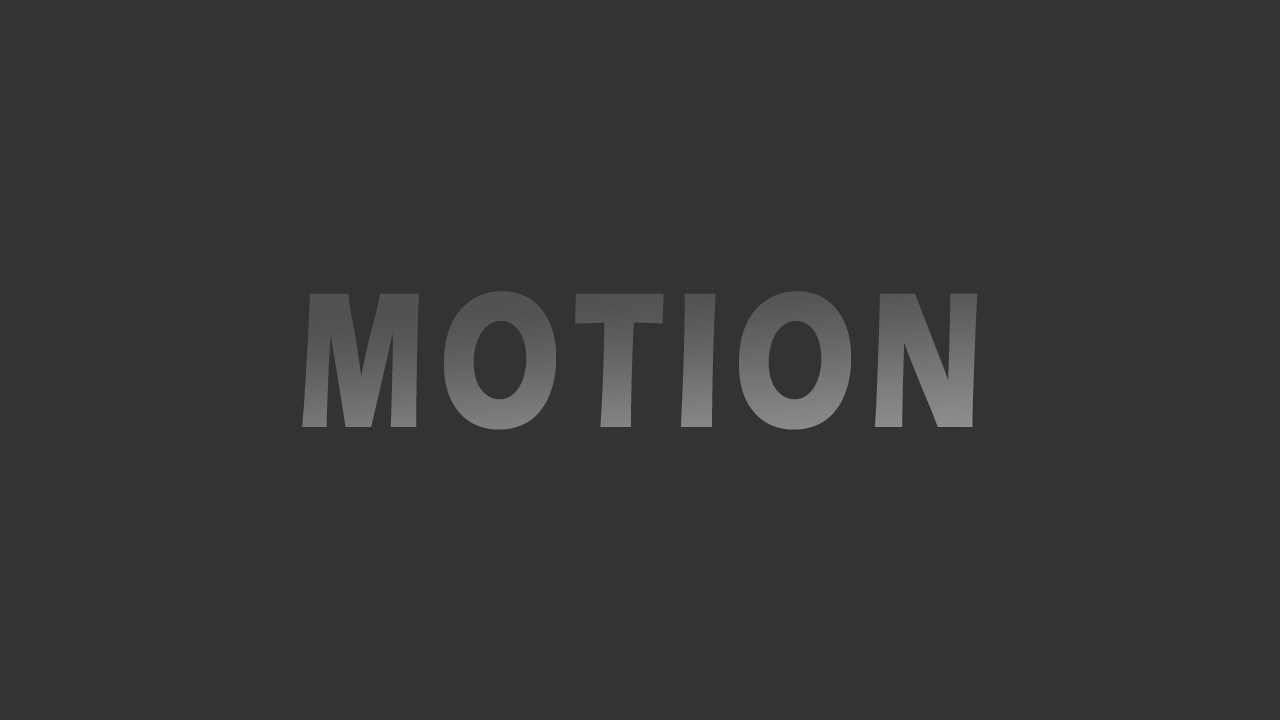
<style>
.page{position:relative;width:1280px;height:720px;background:#333333}
.page>*{position:absolute;margin:0}
.t1{font:200px "ErasITC-Bold";letter-spacing:0.09em;color:#666666;scale:0.7 1}
</style>
<div class="page">
<p class="t1" style="left:302px;top:291px;width:676px;height:139px">MOTION</p>
</div>
